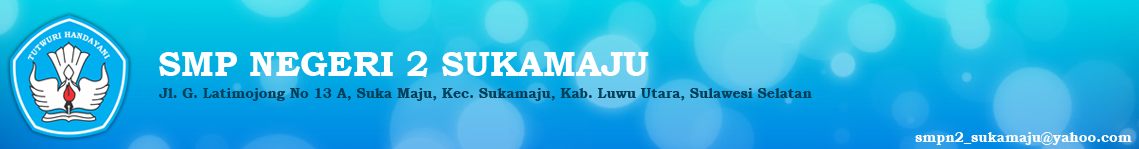
<style>
.page{position:relative;width:1139px;height:149px}
.page>*{position:absolute;margin:0}
.t1{font:35px "BookmanOldStyle-Bold";color:#ffffff}
.t2{font:14px "BookmanOldStyle-Bold";color:#003e57}
.t3{font:14px "BookmanOldStyle-Bold";color:#ffffff}
</style>
<div class="page">
<p class="t1" style="left:159px;top:51px;width:490px;height:26px">SMP NEGERI 2 SUKAMAJU</p>
<p class="t2" style="left:159px;top:88px;width:653px;height:13px">Jl. G. Latimojong No 13 A, Suka Maju, Kec. Sukamaju, Kab. Luwu Utara, Sulawesi Selatan</p>
<p class="t3" style="left:915px;top:132px;width:217px;height:13px">smpn2_sukamaju@yahoo.com</p>
</div>
